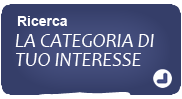
<style>
.page{position:relative;width:182px;height:99px;background:#353e69}
.page>*{position:absolute;margin:0}
.t1{font:14px "Arial-BoldMT";color:#ffffff}
.t2{font:20px/19.5px "Candara-Italic";color:#ffffff}
</style>
<div class="page">
<p class="t1" style="left:17px;top:16px;width:50px;height:10px">Ricerca</p>
<p class="t2" style="left:15px;top:34px;width:139px;height:32px">LA CATEGORIA DI<br>TUO INTERESSE</p>
</div>
